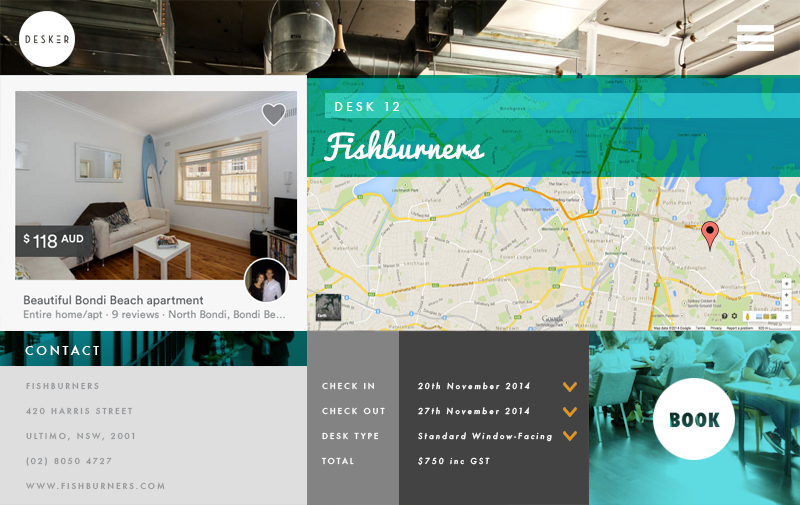
<style>
.page{position:relative;width:800px;height:505px}
.page>*{position:absolute;margin:0}
.t1{font:12px "Futura-Medium";letter-spacing:0.245em;color:#ffffff}
.t2{font:30.8px "Pacifico-Regular";letter-spacing:0.025em;color:#ffffff}
.t3{font:11.9px "Futura-Medium";letter-spacing:0.245em;color:#ffffff}
.t4{font:8px/25px "Futura-Medium";letter-spacing:0.245em;color:#939598;text-transform:uppercase}
.t5{font:8px/25px "Futura-Medium";letter-spacing:0.245em;color:#ffffff}
.t6{font:8px/25px "Futura-MediumItalic";letter-spacing:0.245em;color:#ffffff}
</style>
<div class="page">
<p class="t1" style="left:335px;top:102px;width:64px;height:9px">DESK 12</p>
<p class="t2" style="left:324px;top:130px;width:161px;height:31px">Fishburners</p>
<p class="t3" style="left:25px;top:345px;width:74px;height:10px">CONTACT</p>
<p class="t4" style="left:26px;top:382px;width:139px;height:108px">Fishburners<br>420 Harris Street<br>Ultimo, NSW, 2001<br>(02) 8050 4727<br>www.fishburners.com</p>
<p class="t5" style="left:321px;top:382px;width:64px;height:83px">CHECK IN<br>CHECK OUT<br>DESK TYPE<br>TOTAL</p>
<p class="t6" style="left:418px;top:382px;width:134px;height:84px">20th November 2014<br>27th November 2014<br>Standard Window-Facing<br>$750 inc GST</p>
</div>
